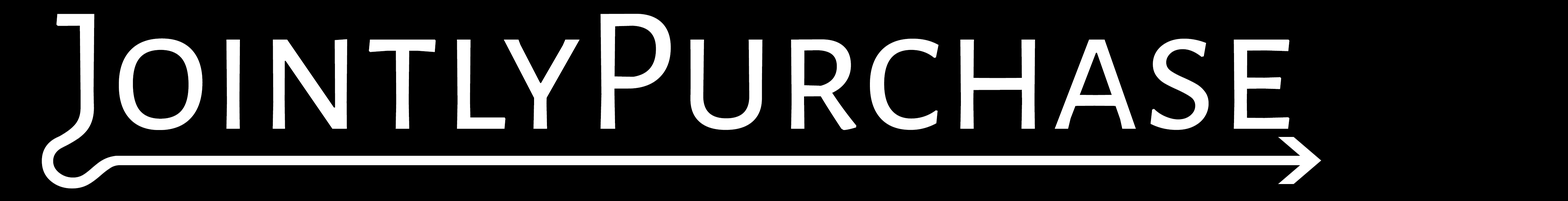
<style>
.page{position:relative;width:1568px;height:201px;background:#000000}
.page>*{position:absolute;margin:0}
.t1{font:178.7px "AlegreyaSansSC-Regular";color:#ffffff}
.t2{font:154.9px "ArialMT";color:#ffffff;scale:0.77 1}
</style>
<div class="page">
<p class="t1" style="left:56px;top:14px;width:1234px;height:133px">JointlyPurchase</p>
<p class="t2" style="left:42px;top:133px;width:113px;height:55px;rotate:90deg">?</p>
</div>
